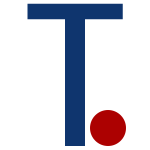
<style>
.page{position:relative;width:150px;height:150px;background:#ffffff}
.page>*{position:absolute;margin:0}
.t1{font:200px "Roboto-Condensed";color:#0f356e}
</style>
<div class="page">
<p class="t1" style="left:27px;top:3px;width:96px;height:143px">T</p>
</div>
